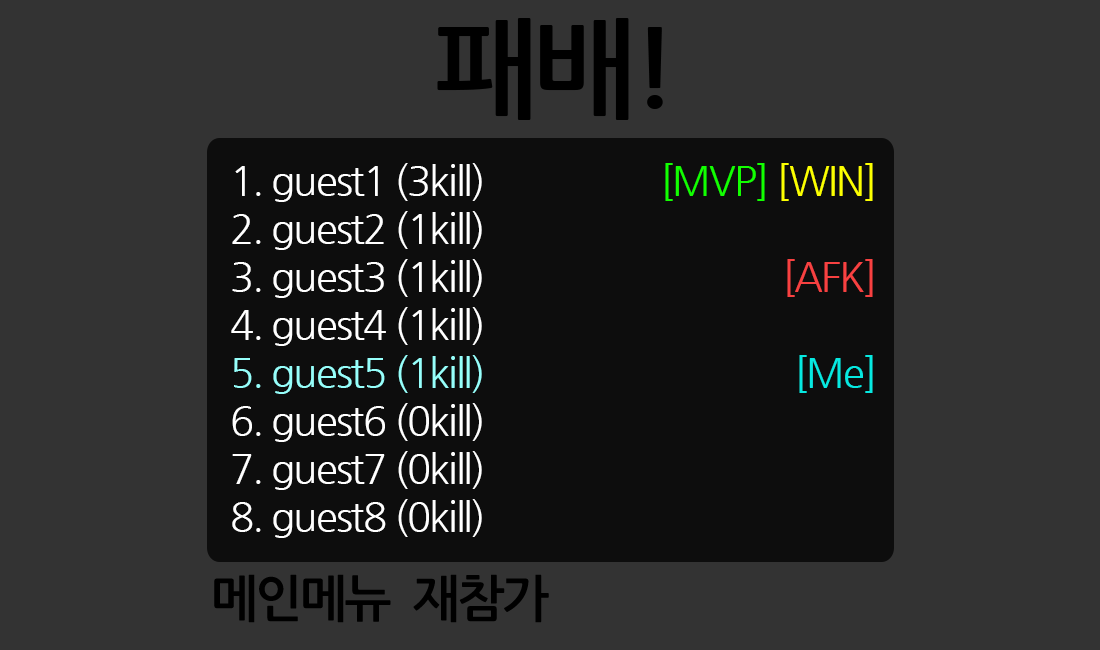
<style>
.page{position:relative;width:1100px;height:650px;background:#333333}
.page>*{position:absolute;margin:0}
.t1{font:110px "NanumGothicBold";letter-spacing:-0.05em;color:#000000}
.t2{font:40px "NanumGothic";letter-spacing:-0.05em;color:#ffffff}
.t3{font:40px "NanumGothic";letter-spacing:-0.05em;color:#96fffb}
.t4{font:40px "NanumGothic";letter-spacing:-0.05em;color:#12ff00}
.t5{font:40px "NanumGothic";letter-spacing:-0.05em;color:#fcff00}
.t6{font:40px "NanumGothic";letter-spacing:-0.05em;color:#f84141}
.t7{font:40px "NanumGothic";letter-spacing:-0.05em;color:#06e9e1}
.t8{font:50px "NanumGothicBold";letter-spacing:-0.05em;color:#000000}
</style>
<div class="page">
<p class="t1" style="left:437px;top:18px;width:226px;height:102px">패배!</p>
<p class="t2" style="left:231px;top:163px;width:251px;height:375px">1. guest1 (3kill)<br>2. guest2 (1kill)<br>3. guest3 (1kill)<br>4. guest4 (1kill)<br><span class="t3">5. guest5 (1kill)<br></span>6. guest6 (0kill)<br>7. guest7 (0kill)<br>8. guest8 (0kill)</p>
<p class="t4" style="left:665px;top:163px;width:208px;height:230px;text-align:right">[MVP] <span class="t5">[WIN]<br><br></span><span class="t6">[AFK]<br><br></span><span class="t7">[Me]</span></p>
<p class="t8" style="left:214px;top:574px;width:177px;height:49px">메인메뉴</p>
<p class="t8" style="left:413px;top:574px;width:136px;height:49px">재참가</p>
</div>
